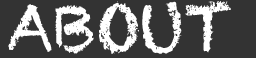
<style>
.page{position:relative;width:256px;height:58px;background:#333333}
.page>*{position:absolute;margin:0}
.t1{font:63px "Chalkduster";color:#ffffff}
</style>
<div class="page">
<p class="t1" style="left:8px;top:1px;width:223px;height:53px">ABOUT</p>
</div>
